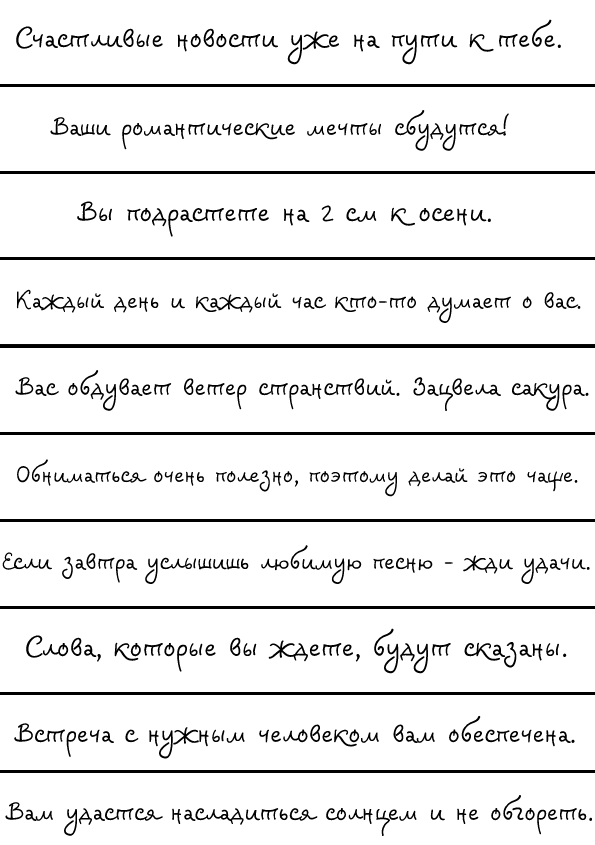
<style>
.page{position:relative;width:595px;height:845px;background:#ffffff}
.page>*{position:absolute;margin:0}
.t1{font:23px "Veles-Regular";color:#000000}
.t2{font:21px "Veles-Regular";color:#000000}
.t3{font:20px "Veles-Regular";color:#000000}
.t4{font:19px "Veles-Regular";color:#000000}
.t5{font:22px "Veles-Regular";color:#000000}
</style>
<div class="page">
<p class="t1" style="left:16px;top:19px;width:545px;height:46px">Счастливые новости уже на пути к тебе.</p>
<p class="t2" style="left:50px;top:110px;width:459px;height:41px">Ваши романтические мечты сбудутся!</p>
<p class="t1" style="left:77px;top:201px;width:414px;height:36px">Вы подрастете на 2 см к осени.</p>
<p class="t3" style="left:16px;top:289px;width:565px;height:34px">Каждый день и каждый час кто-то думает о вас.</p>
<p class="t2" style="left:15px;top:370px;width:574px;height:41px">Вас обдувает ветер странствий. Зацвела сакура.</p>
<p class="t4" style="left:17px;top:459px;width:561px;height:38px">Обниматься очень полезно, поэтому делай это чаще.</p>
<p class="t3" style="left:2px;top:545px;width:588px;height:39px">Если завтра услышишь любимую песню - жди удачи.</p>
<p class="t1" style="left:26px;top:628px;width:541px;height:46px">Слова, которые вы ждете, будут сказаны.</p>
<p class="t5" style="left:14px;top:715px;width:561px;height:44px">Встреча с нужным человеком вам обеспечена.</p>
<p class="t2" style="left:5px;top:795px;width:588px;height:41px">Вам удастся насладиться солнцем и не обгореть.</p>
</div>
